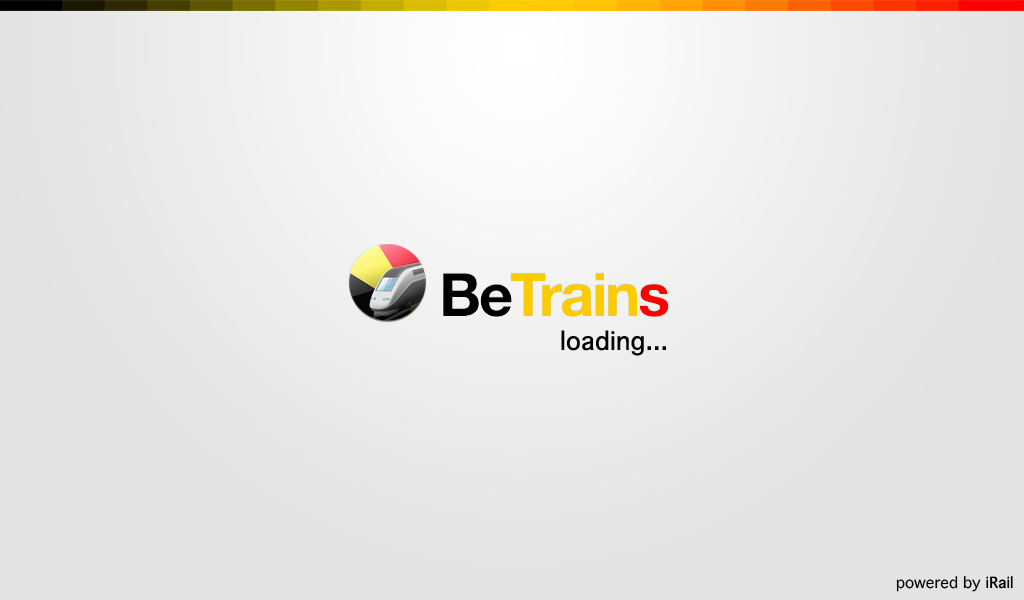
<style>
.page{position:relative;width:1024px;height:600px;background:#e3e3e3}
.page>*{position:absolute;margin:0}
.t1{font:25px "Thonburi-Bold";color:#000000}
.t2{font:15px "Thonburi";color:#000000}
.t3{font:15px "Thonburi-Bold";color:#000000}
</style>
<div class="page">
<p class="t1" style="left:561px;top:330px;width:105px;height:26px">loading...</p>
<p class="t2" style="left:896px;top:576px;width:117px;height:16px">powered by <span class="t3">iRail</span></p>
</div>
